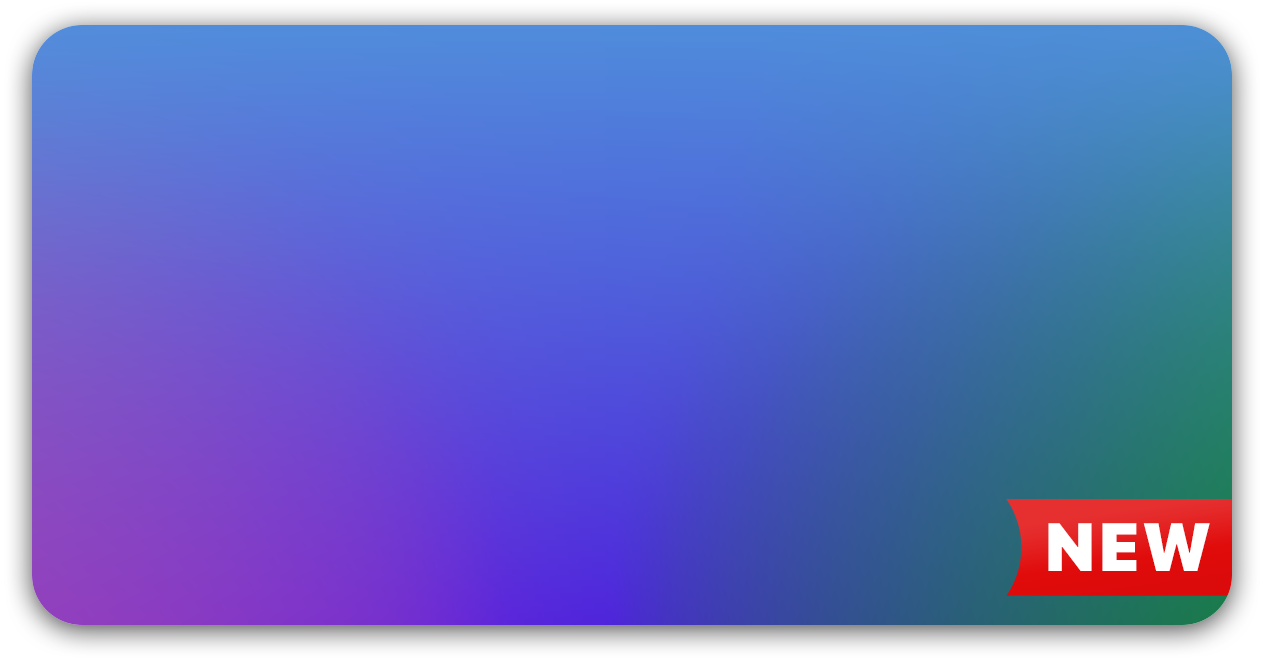
<style>
.page{position:relative;width:1263px;height:660px}
.page>*{position:absolute;margin:0}
.t1{font:67.8px "SFProText-Black";color:#ffffff}
</style>
<div class="page">
<p class="t1" style="left:1048px;top:523px;width:162px;height:48px">NEW</p>
</div>
